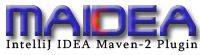
<style>
.page{position:relative;width:200px;height:55px;background:#ffffff}
.page>*{position:absolute;margin:0}
.t1{font:48px "TerminatorTwo"}
.t2{font:12px "Sylfaen";letter-spacing:0.1em;color:#000000;scale:1.05 1}
</style>
<div class="page">
<p class="t1" style="left:6px;top:5px;width:190px;height:31px">MAIDEA</p>
<p class="t2" style="left:6px;top:39px;width:192px;height:13px">IntelliJ IDEA Maven-2 Plugin</p>
</div>
